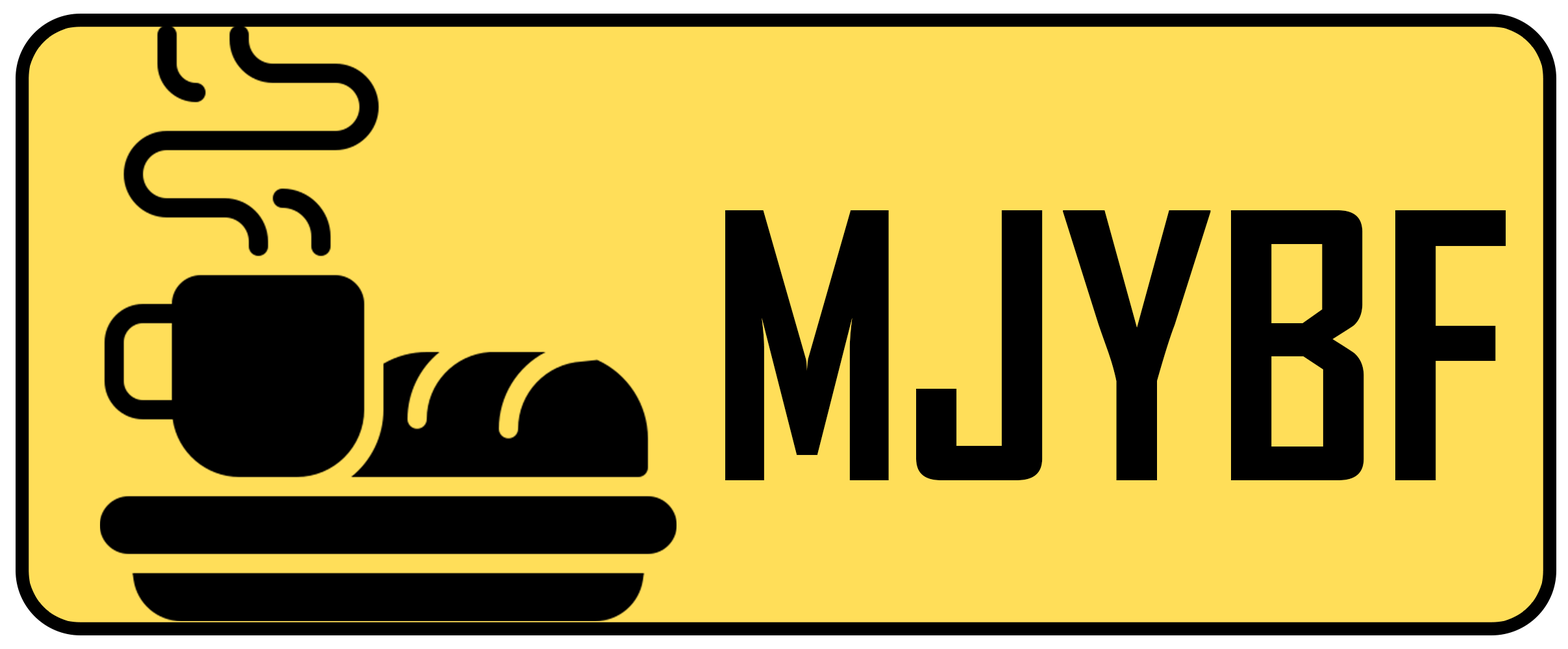
<style>
.page{position:relative;width:1568px;height:649px;background:#ffde59}
.page>*{position:absolute;margin:0}
.t1{font:353.7px "AgencyFB-Bold";color:#000000}
</style>
<div class="page">
<p class="t1" style="left:725px;top:210px;width:781px;height:270px">MJYBF</p>
</div>
